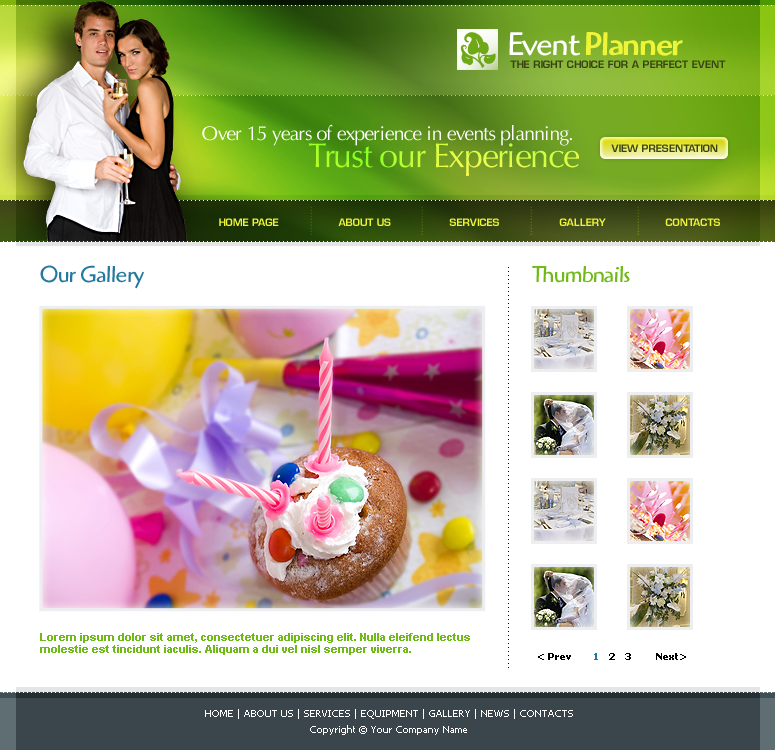
<style>
.page{position:relative;width:775px;height:750px;background:#ffffff}
.page>*{position:absolute;margin:0}
.t1{font:34px "HighlanderStd-Medium";letter-spacing:-0.04em;color:#eef538}
.t2{font:34px "HighlanderStd-Book";letter-spacing:-0.04em;color:#ffffff}
.t3{font:10px "EurostileLTStd-Demi";color:#384314;text-transform:uppercase}
.t4{font:20px "OptimaLTStd";letter-spacing:-0.04em;color:#ffffff}
.t5{font:34px "OptimaLTStd";letter-spacing:-0.04em}
.t6{font:8.3px "EurostileLTStd-Demi";text-transform:uppercase}
.t7{font:10px "EurostileLTStd-Demi";color:#eef538;text-transform:uppercase}
.t8{font:24px "HighlanderStd-Book";letter-spacing:-0.04em;color:#2479a0}
.t9{font:10px "TrebuchetMS";color:#000000}
.t10{font:24px "HighlanderStd-Book";letter-spacing:-0.04em;color:#70ba17}
.t11{font:11px/12px "Arial-BoldMT";color:#70ba17}
.t12{font:10px "Tahoma-Bold";color:#000000}
.t13{font:10px "Tahoma-Bold";color:#2479a0}
.t14{font:10px/16px "Tahoma";color:#ffffff}
</style>
<div class="page">
<p class="t1" style="left:509px;top:32px;width:174px;height:24px"><span class="t2">Event </span>Planner</p>
<p class="t3" style="left:510px;top:60px;width:216px;height:8px">THE RIGHT CHOICE FOR A PERFECT EVENT</p>
<p class="t4" style="left:202px;top:124px;width:370px;height:22px">Over 15 years of experience in events planning.</p>
<p class="t5" style="left:308px;top:143px;width:271px;height:33px">Trust our Experience</p>
<p class="t3" style="left:611px;top:144px;width:107px;height:8px">VIEW PRESENTATION</p>
<p class="t6" style="left:310px;top:206px;width:2px;height:29px;rotate:90deg">..........</p>
<p class="t6" style="left:421px;top:206px;width:2px;height:29px;rotate:90deg">..........</p>
<p class="t6" style="left:530px;top:206px;width:2px;height:29px;rotate:90deg">..........</p>
<p class="t6" style="left:637px;top:206px;width:2px;height:29px;rotate:90deg">..........</p>
<p class="t7" style="left:219px;top:218px;width:60px;height:8px">HOME PAGE</p>
<p class="t7" style="left:338px;top:218px;width:53px;height:8px">ABOUT US</p>
<p class="t7" style="left:449px;top:218px;width:50px;height:8px">SERVICES</p>
<p class="t7" style="left:559px;top:218px;width:47px;height:8px">GALLERY</p>
<p class="t7" style="left:665px;top:218px;width:55px;height:8px">CONTACTS</p>
<p class="t8" style="left:40px;top:265px;width:104px;height:24px">Our Gallery</p>
<p class="t9" style="left:508px;top:267px;width:1px;height:401px;rotate:90deg">.....................................................................................................</p>
<p class="t10" style="left:532px;top:266px;width:98px;height:17px">Thumbnails</p>
<p class="t11" style="left:40px;top:633px;width:430px;height:22px">Lorem ipsum dolor sit amet, consectetuer adipiscing elit. Nulla eleifend lectus molestie est tincidunt iaculis. Aliquam a dui vel nisl semper viverra.</p>
<p class="t12" style="left:538px;top:653px;width:148px;height:7px">&lt; Prev       <span class="t13">1</span>   2   3        Next&gt;</p>
<p class="t14" style="left:205px;top:709px;width:368px;height:26px;text-align:center">HOME | ABOUT US | SERVICES | EQUIPMENT | GALLERY | NEWS | CONTACTS<br>Copyright © Your Company Name</p>
</div>
